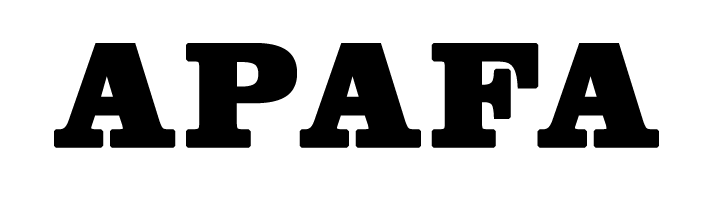
<style>
.page{position:relative;width:707px;height:200px;background:#ffffff}
.page>*{position:absolute;margin:0}
.t1{font:150px "ClarendonBT-Black";letter-spacing:0.1em;color:#000000;font-weight:bold}
</style>
<div class="page">
<p class="t1" style="left:54px;top:43px;width:605px;height:105px">APAFA</p>
</div>
